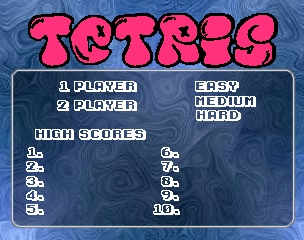
<style>
.page{position:relative;width:304px;height:240px}
.page>*{position:absolute;margin:0}
.t1{font:12px "KarmaticArcade";color:#ffffff}
</style>
<div class="page">
<p class="t1" style="left:195px;top:81px;width:61px;height:40px;text-align:center">Easy<br>      Medium<br> Hard</p>
<p class="t1" style="left:35px;top:129px;width:111px;height:11px">high  Scores</p>
<p class="t1" style="left:26px;top:147px;width:18px;height:68px;text-align:center">1. <br>2. <br>3. <br>4. <br>5.</p>
<p class="t1" style="left:153px;top:147px;width:27px;height:68px;text-align:center">6. <br>  7. <br>  8.<br>  9.<br>10.</p>
</div>
